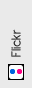
<style>
.page{position:relative;width:32px;height:88px;background:#eaeaea}
.page>*{position:absolute;margin:0}
.t1{font:14px "Antipasto"}
</style>
<div class="page">
<p class="t1" style="left:11px;top:29px;width:10px;height:28px;rotate:-90deg">Flickr</p>
</div>
